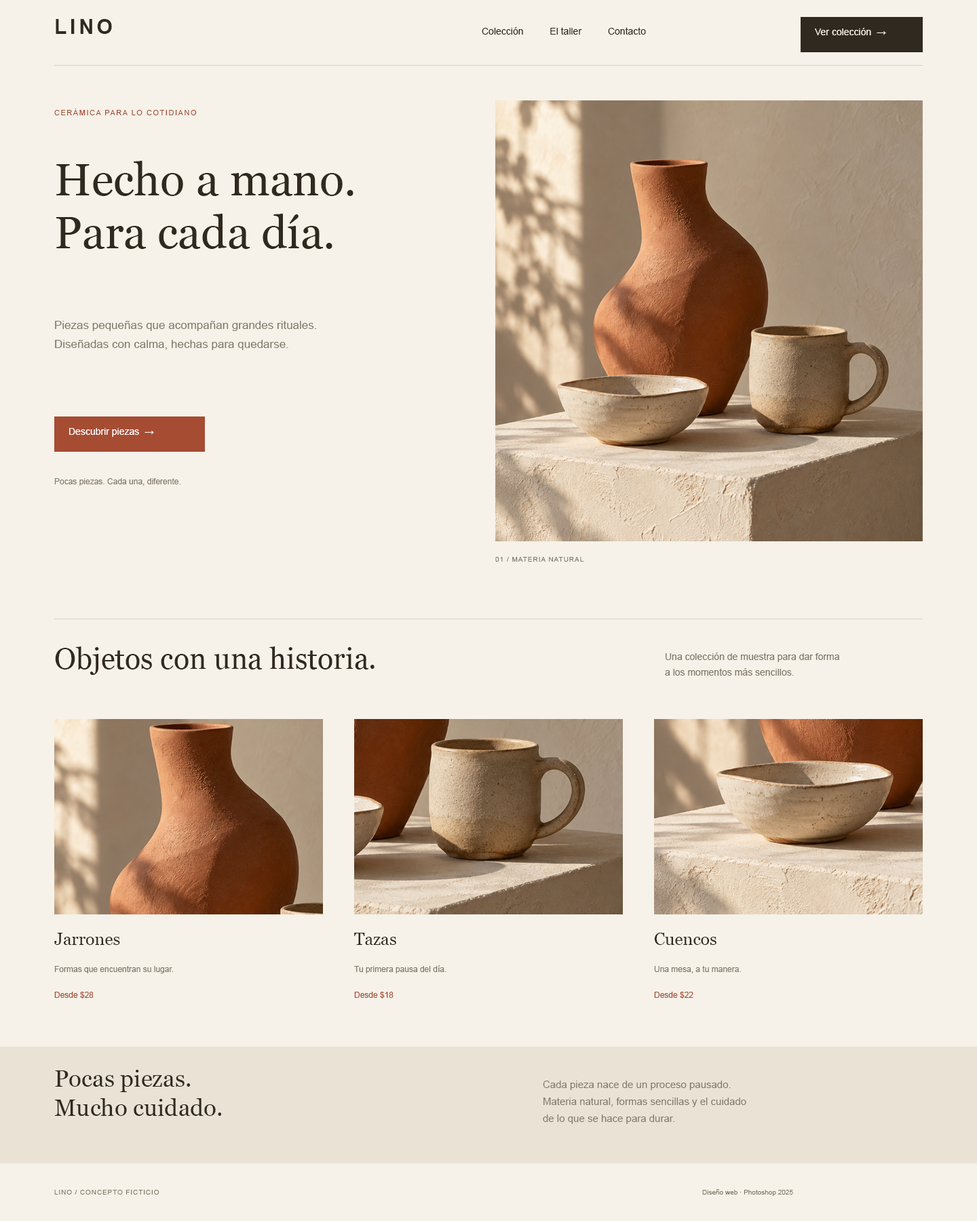
<style>
.page{position:relative;width:977px;height:1221px;background:#f6f2e9}
.page>*{position:absolute;margin:0}
.t1{font:20.3px "Arial-BoldMT";letter-spacing:0.16em;color:#30291f}
.t2{font:9.5px "ArialMT";color:#30291f}
.t3{font:9.5px "ArialMT";color:#f6f2e9}
.t4{font:7.5px "ArialMT";letter-spacing:0.14em;color:#a64c33}
.t5{font:45.4px/52.9px "Georgia";color:#30291f}
.t6{font:11.5px/19px "ArialMT";color:#81786a}
.t7{font:9.5px "ArialMT";color:#ffffff}
.t8{font:8.1px "ArialMT";color:#81786a}
.t9{font:6.8px "ArialMT";letter-spacing:0.1em;color:#81786a}
.t10{font:29.2px "Georgia";color:#30291f}
.t11{font:9.5px/15.6px "ArialMT";color:#81786a}
.t12{font:17px "Georgia";color:#30291f}
.t13{font:8.1px "ArialMT";color:#a64c33}
.t14{font:23.7px/29.2px "Georgia";color:#30291f}
.t15{font:10.2px/17px "ArialMT";color:#81786a}
.t16{font:6.8px "ArialMT";letter-spacing:0.09em;color:#81786a}
.t17{font:6.8px "ArialMT";color:#81786a}
</style>
<div class="page">
<p class="t1" style="left:56px;top:19px;width:56px;height:15px">LINO</p>
<p class="t2" style="left:482px;top:27px;width:164px;height:8px">Colección          El taller          Contacto</p>
<p class="t3" style="left:815px;top:28px;width:71px;height:7px">Ver colección  →</p>
<p class="t4" style="left:54px;top:109px;width:143px;height:6px">CERÁMICA PARA LO COTIDIANO</p>
<p class="t5" style="left:56px;top:161px;width:297px;height:88px">Hecho a mano.<br>Para cada día.</p>
<p class="t6" style="left:55px;top:321px;width:262px;height:29px">Piezas pequeñas que acompañan grandes rituales.<br>Diseñadas con calma, hechas para quedarse.</p>
<p class="t7" style="left:69px;top:428px;width:85px;height:9px">Descubrir piezas  →</p>
<p class="t8" style="left:54px;top:478px;width:126px;height:8px">Pocas piezas. Cada una, diferente.</p>
<p class="t9" style="left:495px;top:557px;width:89px;height:5px">01 / MATERIA NATURAL</p>
<p class="t10" style="left:55px;top:646px;width:319px;height:29px">Objetos con una historia.</p>
<p class="t11" style="left:665px;top:652px;width:174px;height:24px">Una colección de muestra para dar forma<br>a los momentos más sencillos.</p>
<p class="t12" style="left:54px;top:933px;width:66px;height:12px">Jarrones</p>
<p class="t12" style="left:354px;top:933px;width:42px;height:12px">Tazas</p>
<p class="t12" style="left:654px;top:933px;width:62px;height:12px">Cuencos</p>
<p class="t8" style="left:54px;top:966px;width:120px;height:7px">Formas que encuentran su lugar.</p>
<p class="t8" style="left:354px;top:965px;width:92px;height:8px">Tu primera pausa del día.</p>
<p class="t8" style="left:654px;top:966px;width:87px;height:7px">Una mesa, a tu manera.</p>
<p class="t13" style="left:54px;top:992px;width:40px;height:6px">Desde $28</p>
<p class="t13" style="left:354px;top:992px;width:39px;height:6px">Desde $18</p>
<p class="t13" style="left:654px;top:992px;width:39px;height:6px">Desde $22</p>
<p class="t14" style="left:54px;top:1070px;width:168px;height:46px">Pocas piezas.<br>Mucho cuidado.</p>
<p class="t15" style="left:543px;top:1080px;width:203px;height:44px">Cada pieza nace de un proceso pausado.<br>Materia natural, formas sencillas y el cuidado<br>de lo que se hace para durar.</p>
<p class="t16" style="left:54px;top:1190px;width:105px;height:4px">LINO / CONCEPTO FICTICIO</p>
<p class="t17" style="left:702px;top:1189px;width:91px;height:7px">Diseño web · Photoshop 2025</p>
</div>
